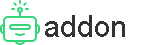
<style>
.page{position:relative;width:142px;height:45px;background:#ffffff}
.page>*{position:absolute;margin:0}
.t1{font:30px "ArialMT";color:#343333}
</style>
<div class="page">
<p class="t1" style="left:45px;top:15px;width:80px;height:22px">addon</p>
</div>
